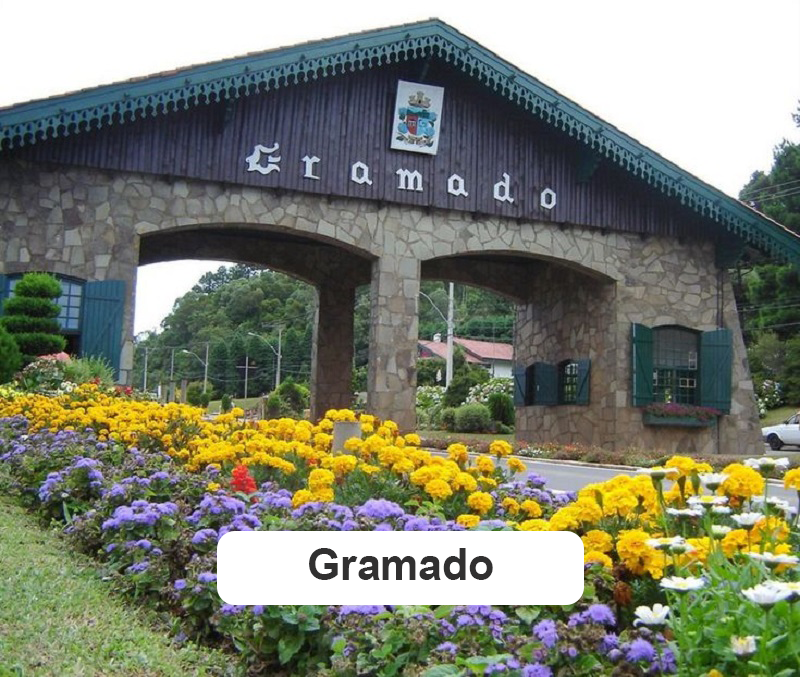
<style>
.page{position:relative;width:800px;height:677px}
.page>*{position:absolute;margin:0}
.t1{font:43.9px "Arial-BoldMT";color:#313030}
</style>
<div class="page">
<p class="t1" style="left:309px;top:548px;width:184px;height:32px">Gramado</p>
</div>
